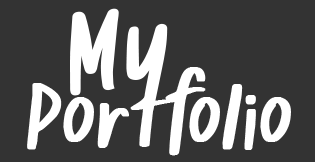
<style>
.page{position:relative;width:315px;height:162px;background:#333333}
.page>*{position:absolute;margin:0}
.t1{font:119px "UIDLETTER-Regular";color:#ffffff;font-weight:bold}
.t2{font:94px "UIDLETTER-Regular";color:#ffffff;font-weight:bold}
</style>
<div class="page">
<p class="t1" style="left:70px;top:8px;width:98px;height:106px;rotate:-5deg">My</p>
<p class="t2" style="left:27px;top:67px;width:264px;height:89px">Portfolio</p>
</div>
